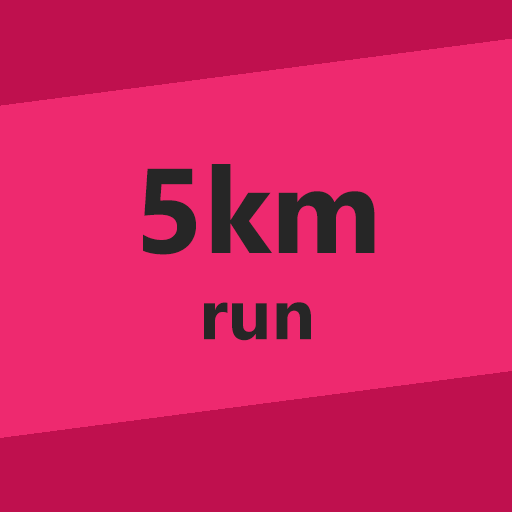
<style>
.page{position:relative;width:512px;height:512px;background:#ee296f}
.page>*{position:absolute;margin:0}
.t1{font:120px "SegoeUI-Bold";color:#262626}
.t2{font:72px "SegoeUI-Bold";color:#262626}
</style>
<div class="page">
<p class="t1" style="left:143px;top:164px;width:232px;height:91px">5km</p>
<p class="t2" style="left:204px;top:302px;width:107px;height:39px">run</p>
</div>
